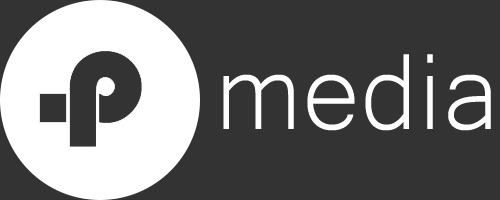
<style>
.page{position:relative;width:500px;height:200px;background:#333333}
.page>*{position:absolute;margin:0}
.t1{font:140px "Microsoft-Yi-Baiti";color:#fefefe}
</style>
<div class="page">
<p class="t1" style="left:223px;top:54px;width:268px;height:77px">media</p>
</div>
